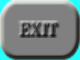
<style>
.page{position:relative;width:80px;height:60px;background:#808080}
.page>*{position:absolute;margin:0}
.t1{font:18px "MyungjoXB-HM"}
</style>
<div class="page">
<p class="t1" style="left:19px;top:22px;width:39px;height:14px">EXIT</p>
</div>
